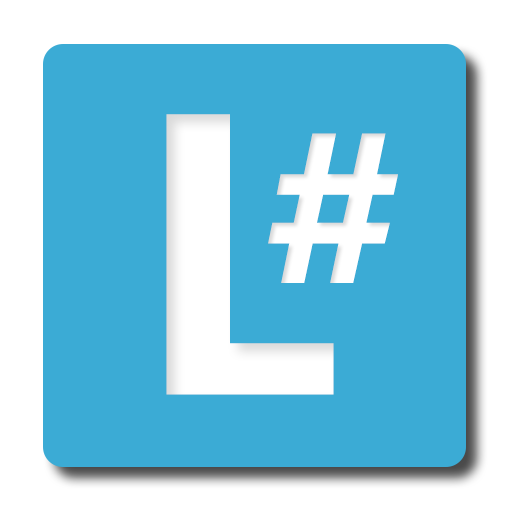
<style>
.page{position:relative;width:512px;height:512px;background:#3babd5}
.page>*{position:absolute;margin:0}
.t1{font:400px "MicrosoftNewTaiLue-Bold";letter-spacing:-0.025em;color:#ffffff}
.t2{font:233.3px "Gadugi-Bold";color:#ffffff}
</style>
<div class="page">
<p class="t1" style="left:166px;top:114px;width:168px;height:281px">L</p>
<p class="t2" style="left:268px;top:133px;width:130px;height:150px">#</p>
</div>
